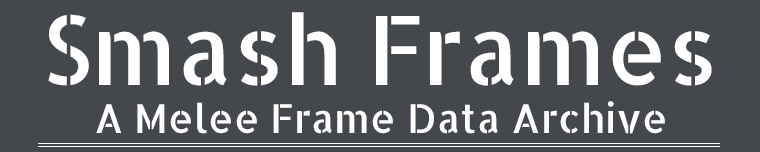
<style>
.page{position:relative;width:760px;height:152px;background:#44484c}
.page>*{position:absolute;margin:0}
.t1{font:96px "AllertaStencil-Regular";color:#ffffff}
.t2{font:40px "AllertaStencil-Regular";color:#ffffff}
</style>
<div class="page">
<p class="t1" style="left:48px;top:12px;width:664px;height:74px">Smash Frames</p>
<p class="t2" style="left:96px;top:101px;width:569px;height:33px">A Melee Frame Data Archive</p>
</div>
